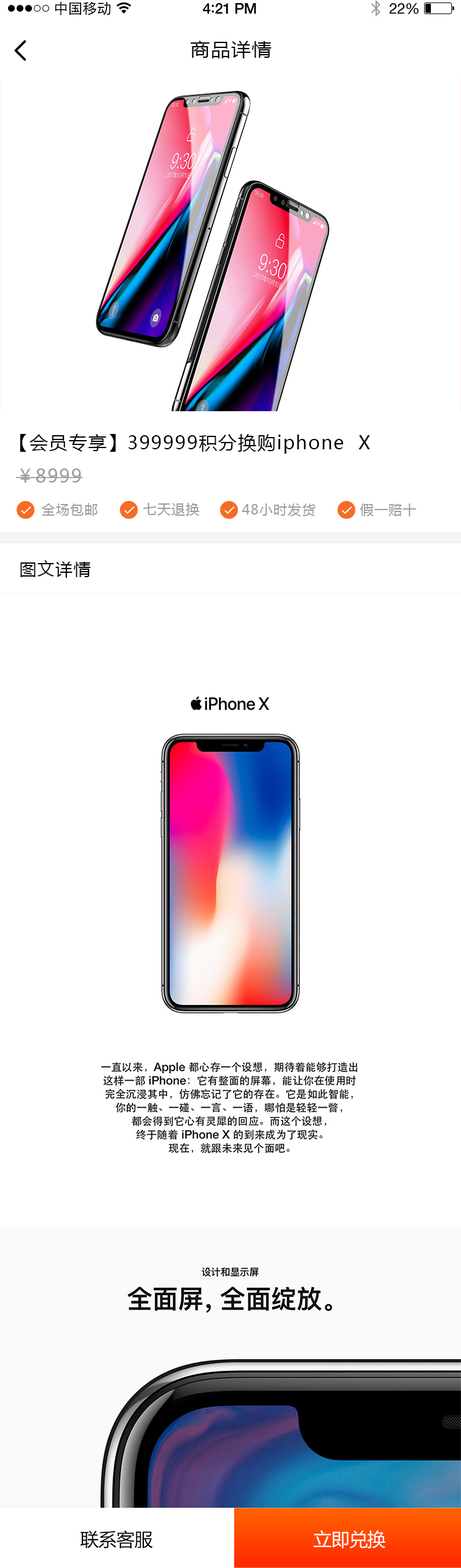
<style>
.page{position:relative;width:461px;height:1568px;background:#ffffff}
.page>*{position:absolute;margin:0}
.t1{font:14.1px "PingFangSC-Regular";letter-spacing:0.02em;color:#000000}
.t2{font:14.8px "HelveticaNeue-Medium";letter-spacing:-0.02em;color:#000000}
.t3{font:16px "Avenir-Medium";letter-spacing:-0.02em;color:#000000}
.t4{font:14.8px "HelveticaNeue";letter-spacing:-0.02em;color:#000000}
.t5{font:18.4px "MicrosoftYaHei";letter-spacing:0.05em;color:#000000;scale:1.06 1}
.t6{font:18.4px "MicrosoftYaHei";letter-spacing:0.06em;color:#000000}
.t7{font:18.4px "MicrosoftYaHei";letter-spacing:0.05em;color:#9d9d9d;text-transform:uppercase}
.t8{font:13.5px "MicrosoftYaHei";letter-spacing:0.05em;color:#9d9d9d;text-transform:uppercase}
.t9{font:17.2px "MicrosoftYaHei";letter-spacing:0.05em;color:#000000;text-transform:uppercase}
.t10{font:18.4px "MicrosoftYaHei";letter-spacing:-0.02em;color:#000000}
.t11{font:18.4px "MicrosoftYaHei";letter-spacing:-0.02em;color:#ffffff}
</style>
<div class="page">
<p class="t1" style="left:55px;top:2px;width:56px;height:13px">中国移动</p>
<p class="t2" style="left:203px;top:3px;width:53px;height:11px">4<span class="t3">:</span>21 PM</p>
<p class="t4" style="left:389px;top:3px;width:30px;height:11px">22%</p>
<p class="t5" style="left:191px;top:41px;width:81px;height:17px">商品详情</p>
<p class="t6" style="left:20px;top:434px;width:350px;height:20px">【会员专享】399999积分换购iphone  X</p>
<p class="t7" style="left:16px;top:468px;width:67px;height:15px">￥8999</p>
<p class="t8" style="left:42px;top:503px;width:56px;height:13px">全场包邮</p>
<p class="t8" style="left:143px;top:503px;width:57px;height:13px">七天退换</p>
<p class="t8" style="left:242px;top:503px;width:73px;height:13px">48小时发货</p>
<p class="t8" style="left:360px;top:503px;width:56px;height:13px">假一赔十</p>
<p class="t9" style="left:20px;top:560px;width:71px;height:18px">图文详情</p>
<p class="t10" style="left:80px;top:1530px;width:73px;height:18px">联系客服</p>
<p class="t11" style="left:313px;top:1530px;width:72px;height:18px">立即兑换</p>
</div>
